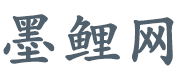
<style>
.page{position:relative;width:180px;height:80px;background:#ffffff}
.page>*{position:absolute;margin:0}
.t1{font:60px "STKaiti";color:#50616d;font-weight:bold}
</style>
<div class="page">
<p class="t1" style="left:3px;top:14px;width:171px;height:52px">墨鲤网</p>
</div>
